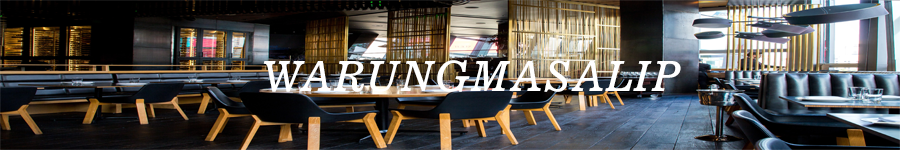
<style>
.page{position:relative;width:900px;height:150px}
.page>*{position:absolute;margin:0}
.t1{font:41.7px "News701BT-ItalicA";color:#ffffff}
</style>
<div class="page">
<p class="t1" style="left:263px;top:60px;width:418px;height:32px">WARUNGMASALIP</p>
</div>
